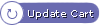
<style>
.page{position:relative;width:100px;height:25px;background:#ffffff}
.page>*{position:absolute;margin:0}
.t1{font:10px "Verdana";letter-spacing:0.05em;color:#ffffff}
.t2{font:10px "Verdana";letter-spacing:0.05em;color:#1d1d3b}
</style>
<div class="page">
<p class="t1" style="left:28px;top:9px;width:65px;height:10px">Update Cart</p>
<p class="t2" style="left:29px;top:10px;width:65px;height:10px">Update Cart</p>
</div>
